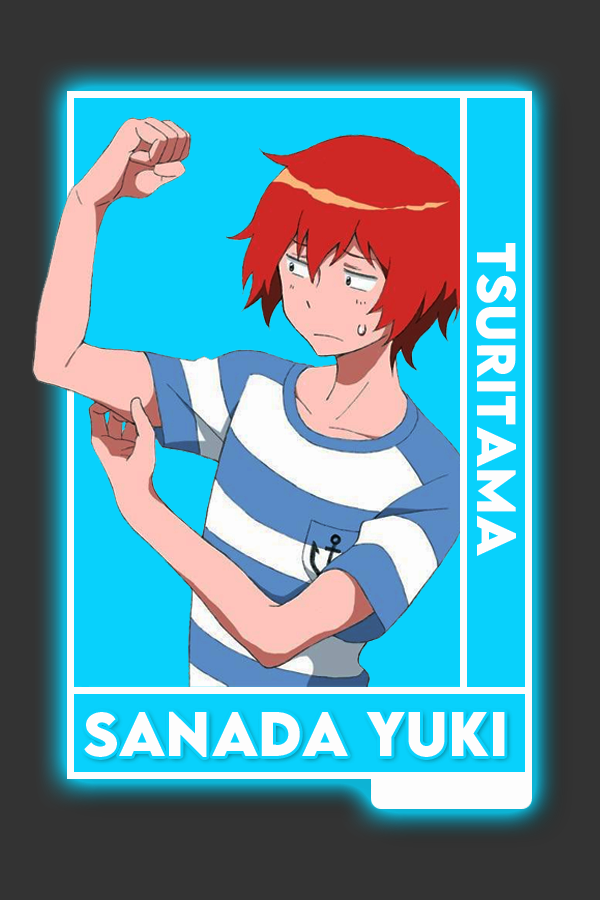
<style>
.page{position:relative;width:600px;height:900px;background:#08d1fc}
.page>*{position:absolute;margin:0}
.t1{font:48.8px "LEMONMILK-Bold";color:#ffffff}
.t2{font:55.4px "LEMONMILK-Bold";color:#ffffff}
</style>
<div class="page">
<p class="t1" style="left:476px;top:243px;width:40px;height:313px;rotate:90deg">TSURITAMA</p>
<p class="t2" style="left:84px;top:711px;width:421px;height:46px">Sanada Yuki</p>
</div>
